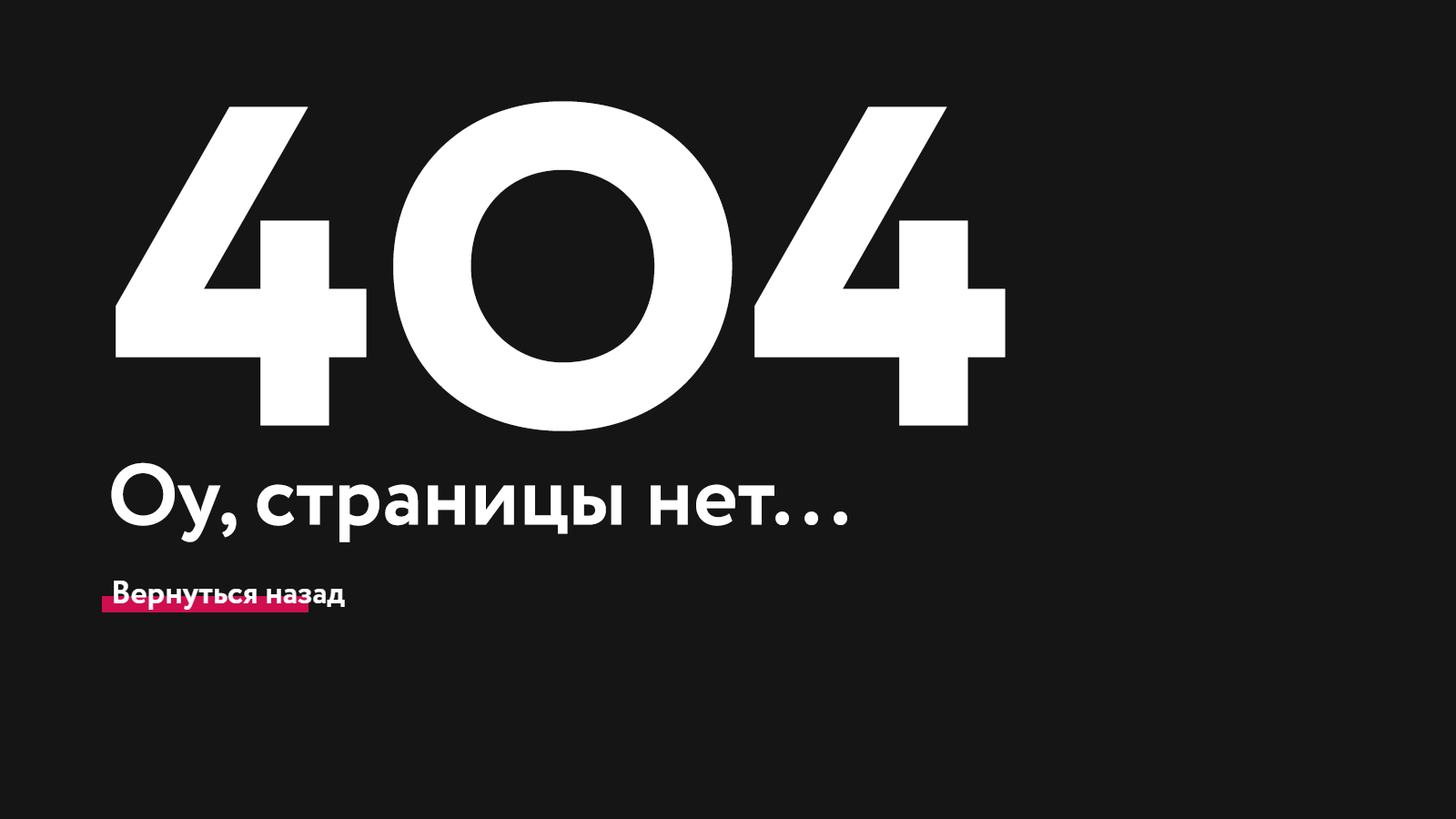
<style>
.page{position:relative;width:1456px;height:819px;background:#151515}
.page>*{position:absolute;margin:0}
.t1{font:455px "Circe-ExtraBold";color:#ffffff}
.t2{font:86.4px "Circe-Bold";color:#ffffff}
</style>
<div class="page">
<p class="t1" style="left:116px;top:101px;width:890px;height:330px">4O4</p>
<p class="t2" style="left:111px;top:462px;width:736px;height:80px">Оу, страницы нет...</p>
</div>
